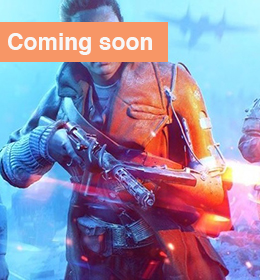
<style>
.page{position:relative;width:260px;height:280px}
.page>*{position:absolute;margin:0}
.t1{font:22.9px "Helvetica-Bold";color:#f7f7f7}
</style>
<div class="page">
<p class="t1" style="left:8px;top:33px;width:144px;height:22px">Coming soon</p>
</div>
